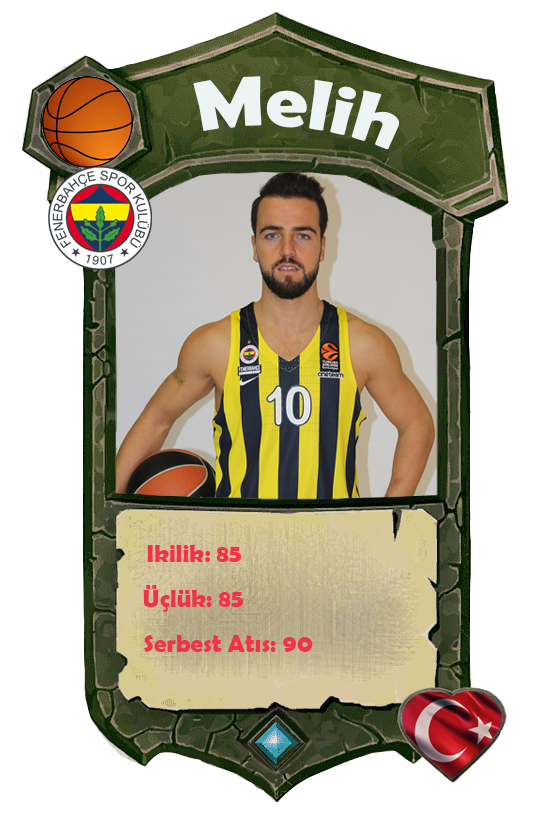
<style>
.page{position:relative;width:558px;height:814px;background:#ffffff}
.page>*{position:absolute;margin:0}
.t1{font:70.9px "BerlinSansFBDemi-Bold";color:#ecf4f4;scale:1.06 1}
.t2{font:25px "BerlinSansFBDemi-Bold";color:#f2314d}
</style>
<div class="page">
<p class="t1" style="left:193px;top:76px;width:207px;height:74px;rotate:6deg">Melih</p>
<p class="t2" style="left:147px;top:545px;width:94px;height:17px">Ikilik: 85</p>
<p class="t2" style="left:143px;top:585px;width:100px;height:27px">Üçlük: 85</p>
<p class="t2" style="left:144px;top:635px;width:169px;height:17px">Serbest Atıs: 90</p>
</div>
